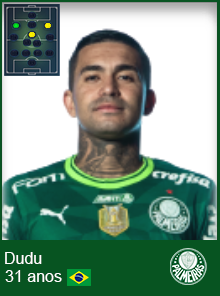
<style>
.page{position:relative;width:220px;height:296px;background:#ffffff}
.page>*{position:absolute;margin:0}
.t1{font:16px "ArialMT";color:#ffffff}
</style>
<div class="page">
<p class="t1" style="left:5px;top:252px;width:37px;height:12px">Dudu</p>
<p class="t1" style="left:5px;top:270px;width:57px;height:12px">31 anos</p>
</div>
